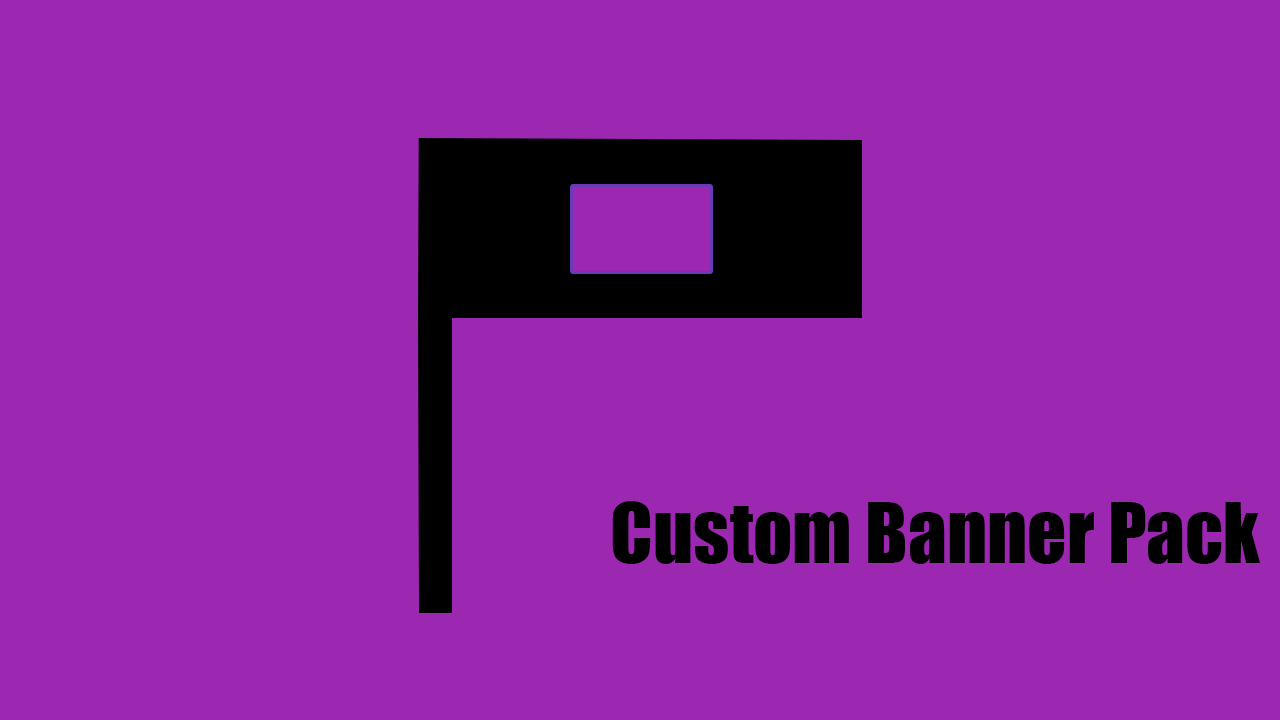
<style>
.page{position:relative;width:1280px;height:720px;background:#9c27b0}
.page>*{position:absolute;margin:0}
.t1{font:77px "Impact";color:#000000}
</style>
<div class="page">
<p class="t1" style="left:612px;top:501px;width:649px;height:63px">Custom Banner Pack</p>
</div>
